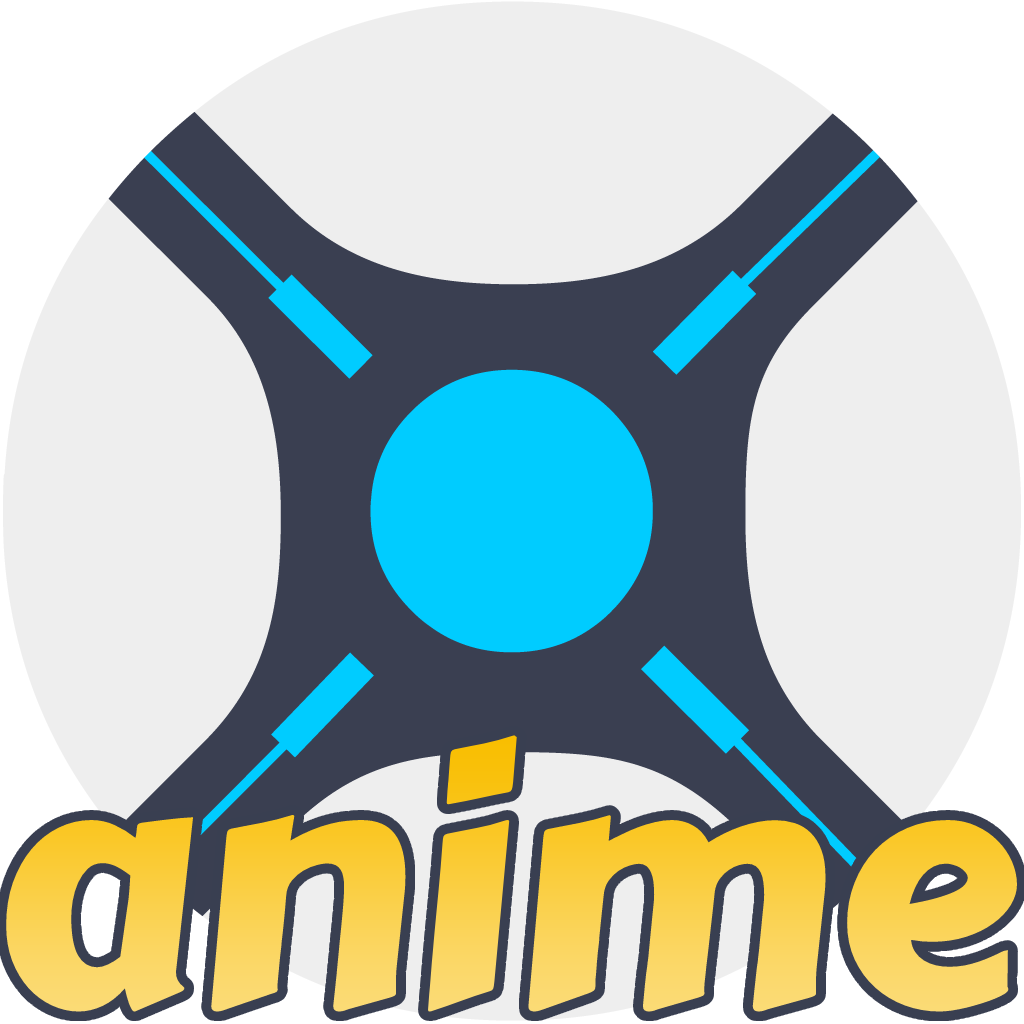
<style>
.page{position:relative;width:1024px;height:1024px;background:#eeeeee}
.page>*{position:absolute;margin:0}
.t1{font:335.8px "CarterOne"}
</style>
<div class="page">
<p class="t1" style="left:6px;top:735px;width:1011px;height:277px">anime</p>
<p class="t1" style="left:6px;top:735px;width:1011px;height:277px">anime</p>
</div>
